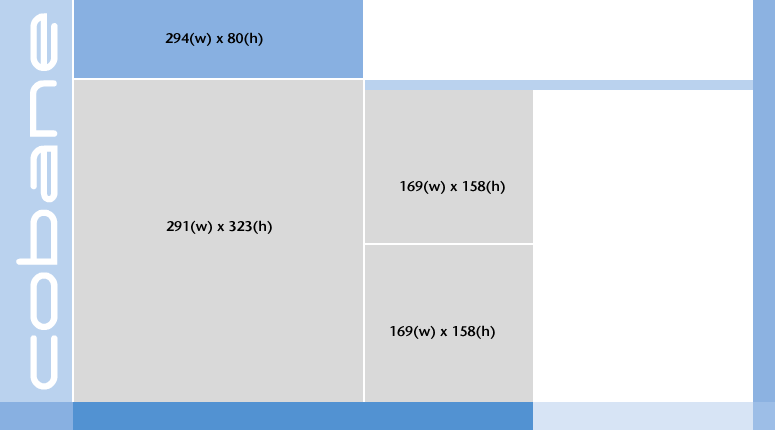
<style>
.page{position:relative;width:775px;height:430px;background:#d9d9d9}
.page>*{position:absolute;margin:0}
.t1{font:14px "StoneSans-Semibold";color:#000000}
</style>
<div class="page">
<p class="t1" style="left:165px;top:32px;width:98px;height:14px">294(w) x 80(h)</p>
<p class="t1" style="left:400px;top:180px;width:105px;height:14px">169(w) x 158(h)</p>
<p class="t1" style="left:166px;top:220px;width:106px;height:14px">291(w) x 323(h)</p>
<p class="t1" style="left:390px;top:325px;width:105px;height:14px">169(w) x 158(h)</p>
</div>
